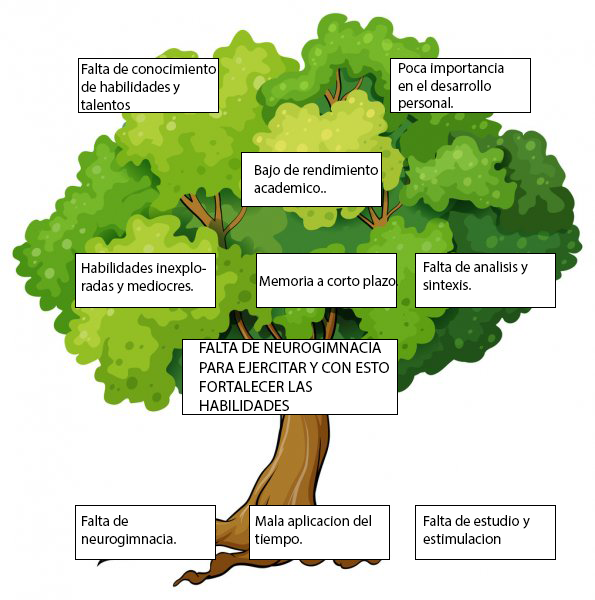
<style>
.page{position:relative;width:595px;height:600px;background:#ffffff}
.page>*{position:absolute;margin:0}
.t1{font:14.7px "MyriadPro-Regular";color:#000000}
.t2{font:16px "MyriadPro-Regular";color:#000000}
</style>
<div class="page">
<p class="t1" style="left:81px;top:63px;width:135px;height:47px">Falta de conocimiento de habilidades y talentos</p>
<p class="t1" style="left:398px;top:63px;width:106px;height:48px">Poca importancia <br>en el desarrollo <br>personal.</p>
<p class="t1" style="left:254px;top:164px;width:124px;height:29px">Bajo de rendimiento <br>academico..</p>
<p class="t1" style="left:82px;top:262px;width:124px;height:32px">Habilidades inexplo-<br>radas y mediocres.</p>
<p class="t1" style="left:423px;top:261px;width:105px;height:29px">Falta de analisis y<br>sintexis.</p>
<p class="t1" style="left:259px;top:275px;width:139px;height:14px">Memoria a corto plazo.</p>
<p class="t2" style="left:200px;top:342px;width:189px;height:69px">FALTA DE NEUROGIMNACIA<br>PARA EJERCITAR Y CON ESTO <br>FORTALECER LAS HABILIDADES<br>Y TALENTOS</p>
<p class="t1" style="left:82px;top:515px;width:94px;height:32px">Falta de neurogimnacia.</p>
<p class="t1" style="left:255px;top:515px;width:116px;height:32px">Mala aplicacion del tiempo.</p>
<p class="t1" style="left:423px;top:515px;width:107px;height:29px">Falta de estudio y estimulacion cerebral.</p>
</div>
